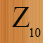
<style>
.page{position:relative;width:43px;height:43px}
.page>*{position:absolute;margin:0}
.t1{font:30px "TimesNewRomanPSMT";color:#0c0c0b}
.t2{font:12px "TimesNewRomanPSMT";color:#0c0c0b}
</style>
<div class="page">
<p class="t1" style="left:12px;top:7px;width:18px;height:20px">Z</p>
<p class="t2" style="left:30px;top:28px;width:11px;height:9px">10</p>
</div>
